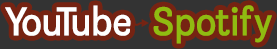
<style>
.page{position:relative;width:277px;height:49px;background:#762312}
.page>*{position:absolute;margin:0}
.t1{font:40px "BretzelGrotesk";color:#ffffff}
.t2{font:40px "BretzelGrotesk";color:#90bb11}
</style>
<div class="page">
<p class="t1" style="left:5px;top:5px;width:267px;height:39px">YouTube  <span class="t2">Spotify</span></p>
</div>
